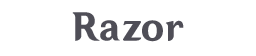
<style>
.page{position:relative;width:256px;height:56px;background:#ffffff}
.page>*{position:absolute;margin:0}
.t1{font:36px "HYWenHei-HEW";color:#4f4e57}
</style>
<div class="page">
<p class="t1" style="left:72px;top:12px;width:112px;height:30px">Razor</p>
</div>
